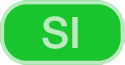
<style>
.page{position:relative;width:125px;height:65px;background:#19c42d}
.page>*{position:absolute;margin:0}
.t1{font:43.5px "HelveticaNeue-Medium";color:#bceac0}
</style>
<div class="page">
<p class="t1" style="left:42px;top:16px;width:36px;height:33px">SI</p>
</div>
